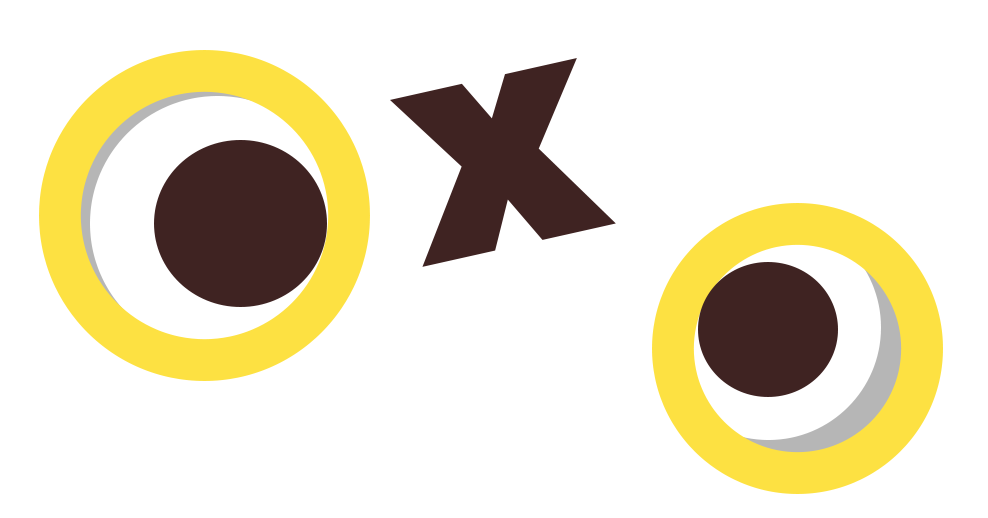
<style>
.page{position:relative;width:988px;height:518px;background:#ffffff}
.page>*{position:absolute;margin:0}
.t1{font:320px "Swiss721BT-Black";color:#3f2322}
</style>
<div class="page">
<p class="t1" style="left:390px;top:58px;width:226px;height:209px;rotate:-13deg">x</p>
</div>
